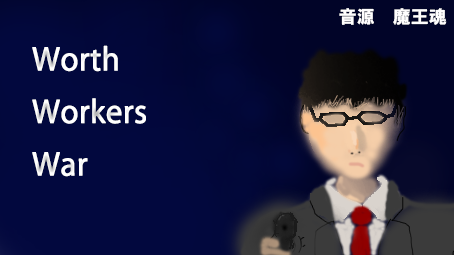
<style>
.page{position:relative;width:454px;height:255px;background:#02083e}
.page>*{position:absolute;margin:0}
.t1{font:18px "HGSSoeiKakugothicUB";color:#fffefe}
.t2{font:30px "KozGoPr6N-Regular";color:#ffffff;font-weight:bold}
</style>
<div class="page">
<p class="t1" style="left:339px;top:8px;width:108px;height:17px">音源　魔王魂</p>
<p class="t2" style="left:32px;top:45px;width:114px;height:132px">Worth<br>Workers<br>War</p>
</div>
